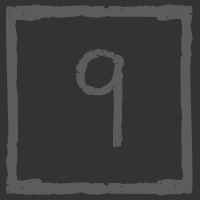
<style>
.page{position:relative;width:200px;height:200px;background:#333333}
.page>*{position:absolute;margin:0}
.t1{font:100px "KGTenThousandReasonsAlt";color:#5c5c5c}
</style>
<div class="page">
<p class="t1" style="left:75px;top:48px;width:49px;height:99px">9</p>
</div>
